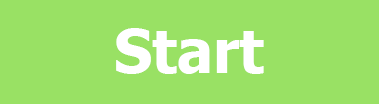
<style>
.page{position:relative;width:379px;height:104px;background:#99e164}
.page>*{position:absolute;margin:0}
.t1{font:60px "Tahoma-Bold";color:#ffffff}
</style>
<div class="page">
<p class="t1" style="left:116px;top:28px;width:148px;height:46px">Start</p>
</div>
